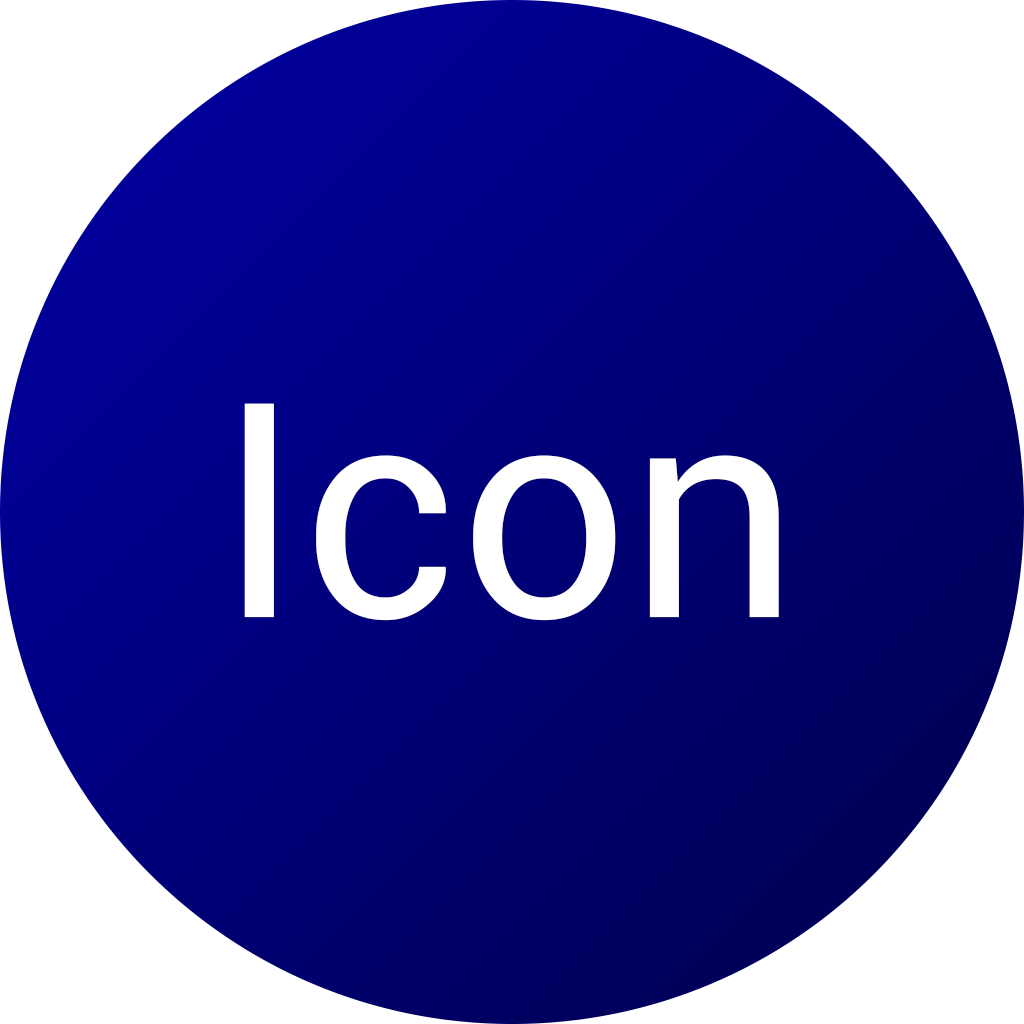
<style>
.page{position:relative;width:1024px;height:1024px;background:#ffffff}
.page>*{position:absolute;margin:0}
.t1{font:300px "Roboto-Regular";color:#ffffff}
</style>
<div class="page">
<p class="t1" style="left:244px;top:403px;width:535px;height:218px">Icon</p>
</div>
